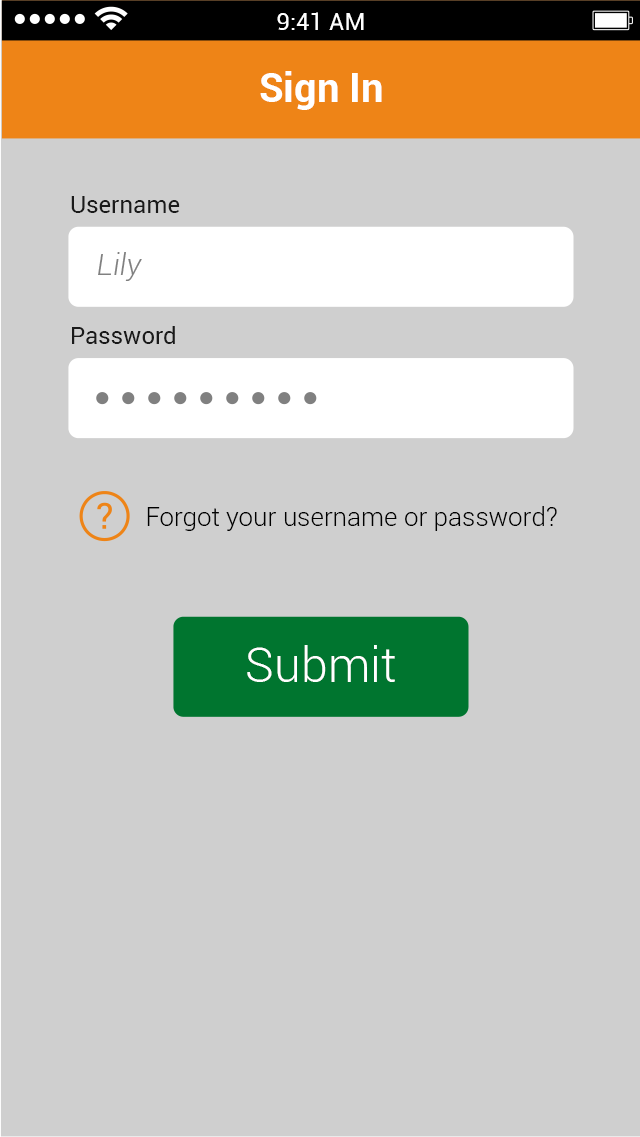
<style>
.page{position:relative;width:640px;height:1137px;background:#cfcfcf}
.page>*{position:absolute;margin:0}
.t1{font:24px "Roboto-Regular";color:#ffffff}
.t2{font:40px "Roboto-Bold";color:#ffffff}
.t3{font:24px "Roboto-Regular";color:#1a1a1a}
.t4{font:30px "Roboto-LightItalic";color:#808080}
.t5{font:26px "Roboto-Light";color:#000000}
.t6{font:48px "Roboto-Light";color:#ffffff}
</style>
<div class="page">
<p class="t1" style="left:277px;top:12px;width:87px;height:18px">9:41 AM</p>
<p class="t2" style="left:260px;top:71px;width:122px;height:39px">Sign In</p>
<p class="t3" style="left:71px;top:196px;width:109px;height:17px">Username</p>
<p class="t4" style="left:98px;top:252px;width:44px;height:29px">Lily</p>
<p class="t3" style="left:72px;top:326px;width:103px;height:18px">Password</p>
<p class="t5" style="left:147px;top:506px;width:410px;height:25px">Forgot your username or password?</p>
<p class="t6" style="left:247px;top:645px;width:148px;height:37px">Submit</p>
</div>
